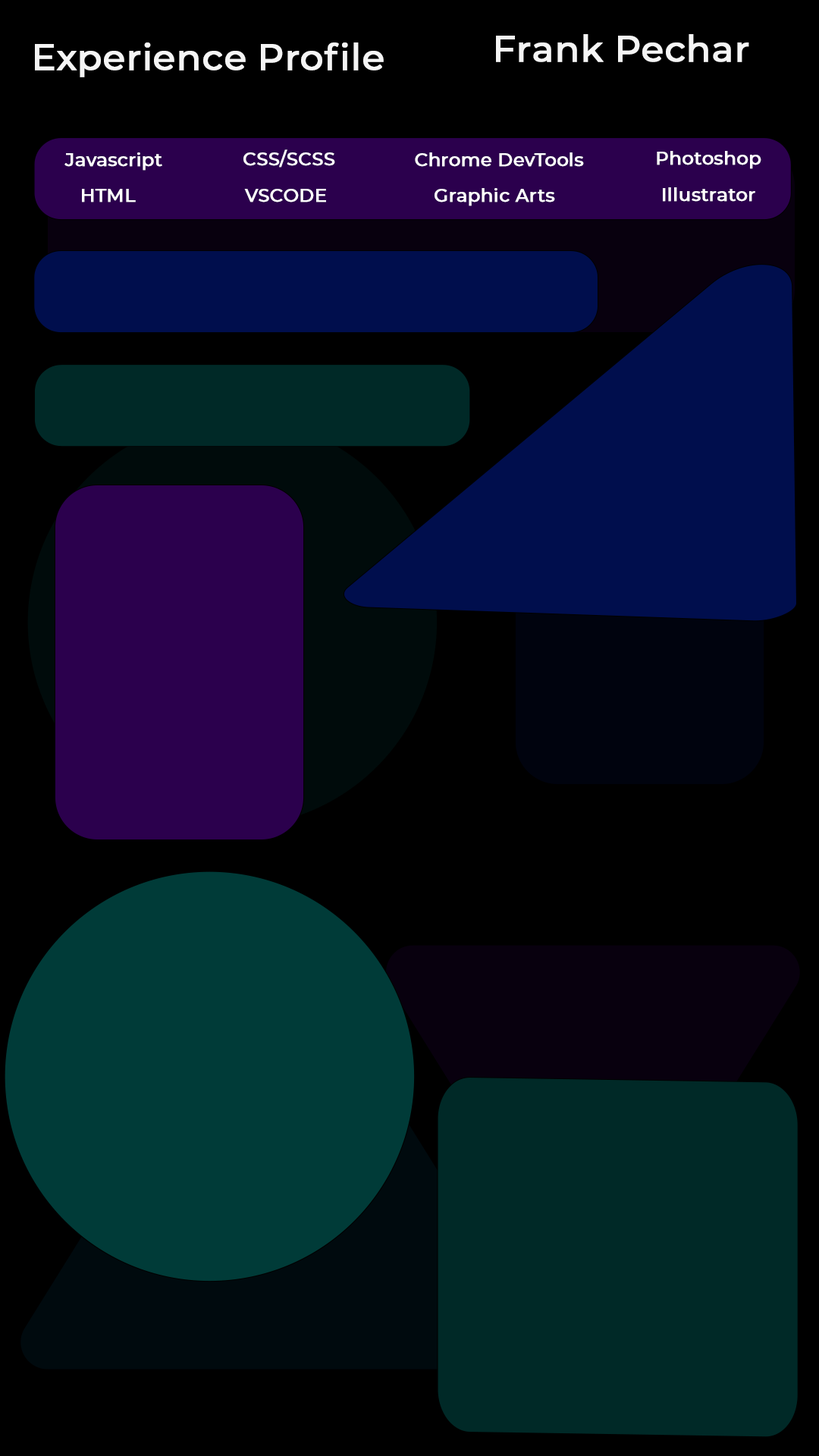
<style>
.page{position:relative;width:819px;height:1456px;background:#000000}
.page>*{position:absolute;margin:0}
.t1{font:36.4px "Montserrat-Medium";color:#f5f5f5;font-weight:bold}
.t2{font:18.2px "Montserrat-Medium";color:#ffffff;font-weight:bold}
</style>
<div class="page">
<p class="t1" style="left:496px;top:34px;width:253px;height:28px">Frank Pechar</p>
<p class="t1" style="left:35px;top:42px;width:349px;height:35px">Experience Profile</p>
<p class="t2" style="left:243px;top:149px;width:92px;height:19px">CSS/SCSS</p>
<p class="t2" style="left:64px;top:152px;width:98px;height:19px">Javascript</p>
<p class="t2" style="left:415px;top:152px;width:169px;height:15px">Chrome DevTools</p>
<p class="t2" style="left:657px;top:151px;width:104px;height:18px">Photoshop</p>
<p class="t2" style="left:82px;top:189px;width:54px;height:13px">HTML</p>
<p class="t2" style="left:244px;top:189px;width:82px;height:13px">VSCODE</p>
<p class="t2" style="left:435px;top:188px;width:120px;height:18px">Graphic Arts</p>
<p class="t2" style="left:663px;top:187px;width:92px;height:15px">Illustrator</p>
</div>
